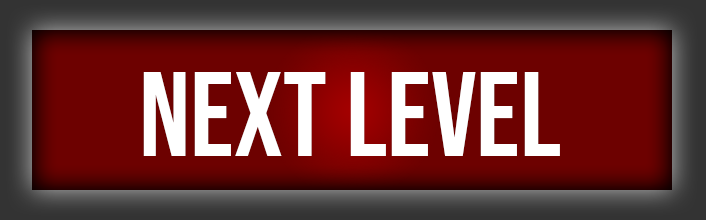
<style>
.page{position:relative;width:706px;height:220px;background:#6d0100}
.page>*{position:absolute;margin:0}
.t1{font:120px "BebasNeue-Regular";color:#ffffff}
</style>
<div class="page">
<p class="t1" style="left:143px;top:72px;width:417px;height:84px">NExt level</p>
</div>
